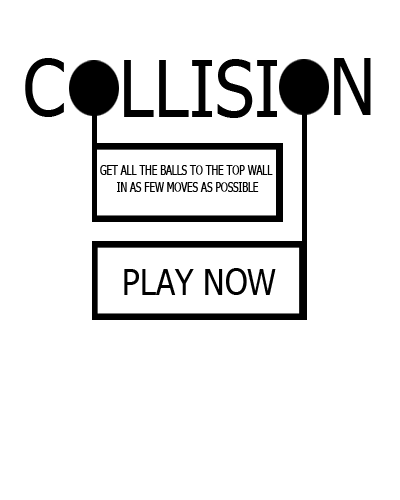
<style>
.page{position:relative;width:400px;height:500px;background:#ffffff}
.page>*{position:absolute;margin:0}
.t1{font:14px "Tahoma";color:#000000;scale:0.7 1}
.t2{font:36.2px "Tahoma";color:#000000;scale:0.88 1}
</style>
<div class="page">
<p class="t1" style="left:100px;top:165px;width:173px;height:27px;text-align:center">GET ALL THE BALLS TO THE TOP WALL<br> IN AS FEW MOVES AS POSSIBLE</p>
<p class="t2" style="left:124px;top:268px;width:152px;height:27px">PLAY NOW</p>
</div>
